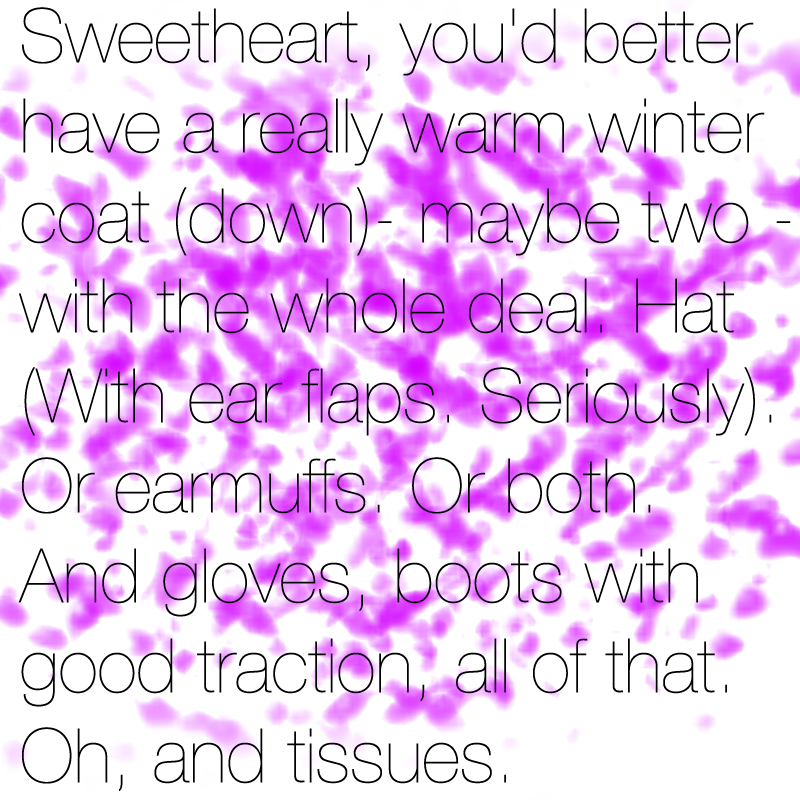
<style>
.page{position:relative;width:800px;height:800px;background:#ffffff}
.page>*{position:absolute;margin:0}
.t1{font:75px "HelveticaNeue-UltraLight";color:#000000}
</style>
<div class="page">
<p class="t1" style="left:18px;top:7px;width:773px;height:785px">Sweetheart, you'd better <br>have a really warm winter <br>coat (down)- maybe two - <br>with the whole deal. Hat <br>(With ear flaps. Seriously). <br>Or earmuffs. Or both. <br>And gloves, boots with <br>good traction, all of that. <br>Oh, and tissues.</p>
</div>
